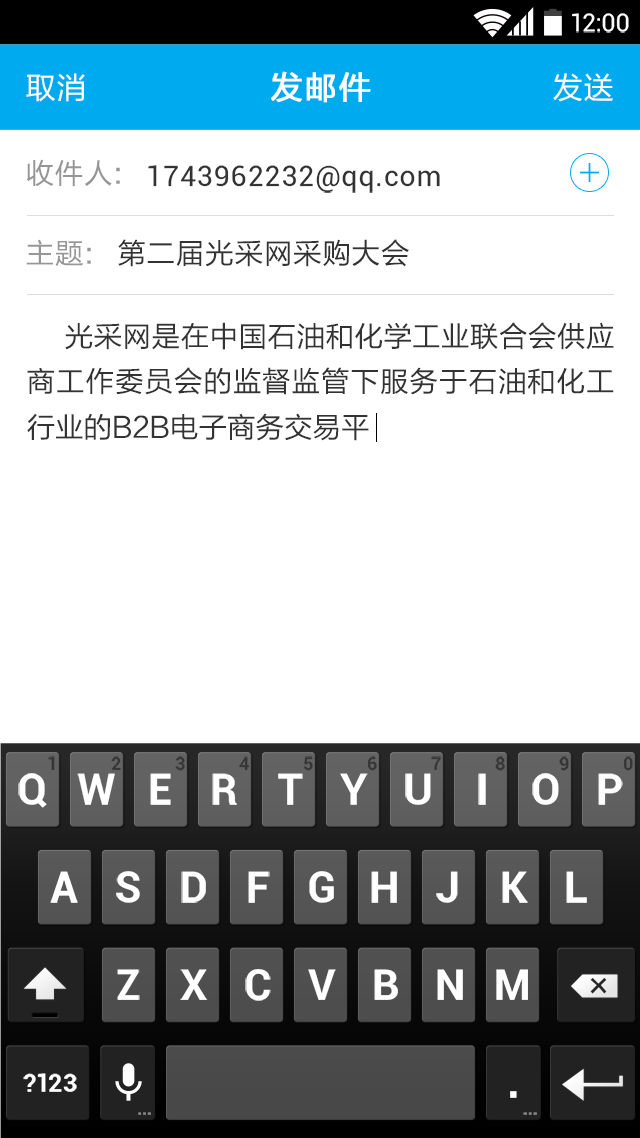
<style>
.page{position:relative;width:640px;height:1138px;background:#ffffff}
.page>*{position:absolute;margin:0}
.t1{font:24.9px "Roboto-Regular";color:#ffffff}
.t2{font:30.2px "FZLTHJW--GB1-0";letter-spacing:0.03em;color:#ffffff}
.t3{font:32px "FZLTHJW--GB1-0";letter-spacing:0.02em;color:#ffffff;font-weight:bold}
.t4{font:28.4px "FZLTHJW--GB1-0";letter-spacing:0.03em;color:#969696}
.t5{font:28.4px "Roboto-Regular";letter-spacing:0.03em;color:#333333}
.t6{font:28.4px "FZLTHJW--GB1-0";letter-spacing:0.03em;color:#333333}
.t7{font:28.4px/45.6px "FZLTHJW--GB1-0";color:#333333}
.t8{font:17.8px "Roboto-Bold";color:#282828}
.t9{font:42.7px "Roboto-Bold";color:#ffffff}
.t10{font:24.9px "Roboto-Bold";color:#ffffff}
.t11{font:17.8px "Roboto-Bold";letter-spacing:-0.025em;color:#848484}
</style>
<div class="page">
<p class="t1" style="left:572px;top:13px;width:57px;height:20px">12:00</p>
<p class="t2" style="left:26px;top:73px;width:59px;height:29px">取消</p>
<p class="t3" style="left:271px;top:71px;width:100px;height:32px">发邮件</p>
<p class="t2" style="left:553px;top:73px;width:60px;height:29px">发送</p>
<p class="t4" style="left:27px;top:159px;width:93px;height:28px">收件人:</p>
<p class="t5" style="left:148px;top:165px;width:292px;height:28px">1743962232@qq.com</p>
<p class="t4" style="left:26px;top:239px;width:65px;height:28px">主题:</p>
<p class="t6" style="left:118px;top:239px;width:291px;height:28px">第二届光采网采购大会</p>
<p class="t7" style="left:27px;top:322px;width:587px;height:119px;text-align:justify">光采网是在中国石油和化学工业联合会供应商工作委员会的监督监管下服务于石油和化工行业的B2B电子商务交易平</p>
<p class="t8" style="left:48px;top:756px;width:7px;height:14px;opacity:0.8">1</p>
<p class="t8" style="left:111px;top:756px;width:10px;height:14px;opacity:0.8">2</p>
<p class="t8" style="left:175px;top:756px;width:10px;height:15px;opacity:0.8">3</p>
<p class="t8" style="left:239px;top:756px;width:10px;height:14px;opacity:0.8">4</p>
<p class="t8" style="left:304px;top:756px;width:9px;height:15px;opacity:0.8">5</p>
<p class="t8" style="left:368px;top:756px;width:9px;height:15px;opacity:0.8">6</p>
<p class="t8" style="left:431px;top:756px;width:10px;height:14px;opacity:0.8">7</p>
<p class="t8" style="left:495px;top:756px;width:10px;height:15px;opacity:0.8">8</p>
<p class="t8" style="left:559px;top:756px;width:10px;height:15px;opacity:0.8">9</p>
<p class="t8" style="left:624px;top:756px;width:9px;height:15px;opacity:0.8">0</p>
<p class="t9" style="left:18px;top:773px;width:29px;height:35px">Q</p>
<p class="t9" style="left:77px;top:773px;width:38px;height:32px">W</p>
<p class="t9" style="left:150px;top:773px;width:21px;height:32px">E</p>
<p class="t9" style="left:212px;top:773px;width:25px;height:32px">R</p>
<p class="t9" style="left:278px;top:773px;width:25px;height:32px">T</p>
<p class="t9" style="left:340px;top:773px;width:28px;height:32px">Y</p>
<p class="t9" style="left:405px;top:773px;width:26px;height:32px">U</p>
<p class="t9" style="left:478px;top:773px;width:8px;height:32px">I</p>
<p class="t9" style="left:532px;top:773px;width:27px;height:32px">O</p>
<p class="t9" style="left:598px;top:773px;width:25px;height:32px">P</p>
<p class="t9" style="left:50px;top:871px;width:28px;height:32px">A</p>
<p class="t9" style="left:116px;top:871px;width:24px;height:32px">S</p>
<p class="t9" style="left:181px;top:871px;width:25px;height:32px">D</p>
<p class="t9" style="left:248px;top:871px;width:22px;height:32px">F</p>
<p class="t9" style="left:309px;top:871px;width:25px;height:32px">G</p>
<p class="t9" style="left:371px;top:871px;width:26px;height:32px">H</p>
<p class="t9" style="left:436px;top:871px;width:22px;height:32px">J</p>
<p class="t9" style="left:502px;top:871px;width:26px;height:32px">K</p>
<p class="t9" style="left:566px;top:871px;width:21px;height:32px">L</p>
<p class="t9" style="left:117px;top:969px;width:23px;height:31px">Z</p>
<p class="t9" style="left:180px;top:969px;width:28px;height:31px">X</p>
<p class="t9" style="left:245px;top:969px;width:26px;height:32px">C</p>
<p class="t9" style="left:308px;top:969px;width:28px;height:31px">V</p>
<p class="t9" style="left:374px;top:969px;width:24px;height:31px">B</p>
<p class="t9" style="left:437px;top:969px;width:26px;height:31px">N</p>
<p class="t9" style="left:496px;top:969px;width:32px;height:31px">M</p>
<p class="t10" style="left:23px;top:1073px;width:54px;height:19px">?123</p>
<p class="t9" style="left:510px;top:1091px;width:7px;height:7px">.</p>
<p class="t11" style="left:138px;top:1112px;width:13px;height:3px">...</p>
<p class="t11" style="left:523px;top:1112px;width:14px;height:3px">...</p>
</div>
